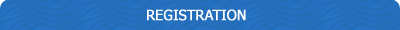
<style>
.page{position:relative;width:400px;height:30px}
.page>*{position:absolute;margin:0}
.t1{font:14px "Tahoma";color:#ffffff;font-weight:bold}
</style>
<div class="page">
<p class="t1" style="left:147px;top:9px;width:99px;height:12px">REGISTRATION</p>
</div>
